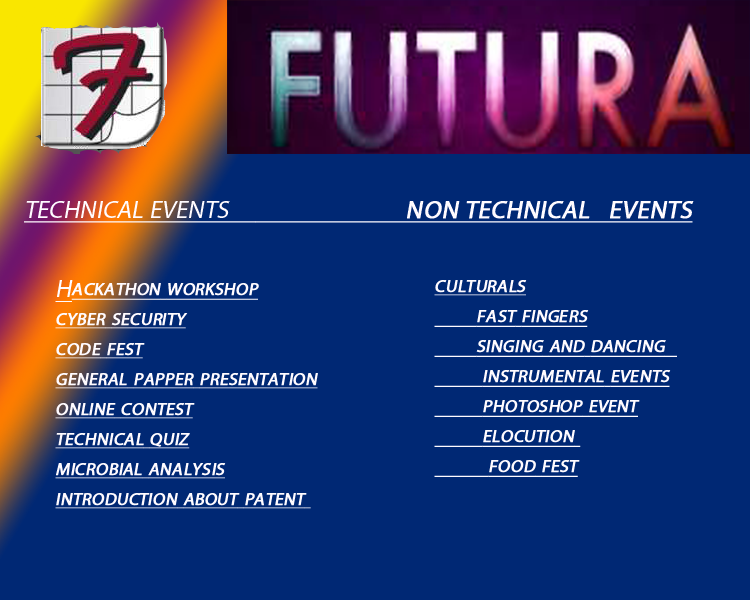
<style>
.page{position:relative;width:750px;height:600px;background:#002874}
.page>*{position:absolute;margin:0}
.t1{font:25px "MyriadPro-Regular";color:#fffbff;text-transform:uppercase;font-weight:bold;font-style:italic;text-decoration:underline}
.t2{font:25px "MyriadPro-Regular";color:#fffbff;text-transform:uppercase;font-style:italic;text-decoration:underline}
.t3{font:25px "MyriadPro-Regular";color:#fffbff;font-variant:small-caps;font-weight:bold;font-style:italic;text-decoration:underline}
</style>
<div class="page">
<p class="t1" style="left:24px;top:201px;width:670px;height:22px"><span class="t2">TECHNICAL EVENTS     </span>                         NON TECHNICAL   EVENTS</p>
<p class="t3" style="left:55px;top:280px;width:263px;height:229px"><span class="t2">H</span>ackathon workshop<br>cyber security<br>code fest<br>general papper presentation<br>online contest<br>technical quiz<br>microbial analysis<br>introduction about patent</p>
<p class="t3" style="left:434px;top:280px;width:243px;height:197px">culturals<br>       fast fingers<br>       singing and dancing  <br>        instrumental events<br>        photoshop event<br>        elocution <br>         food fest</p>
</div>
